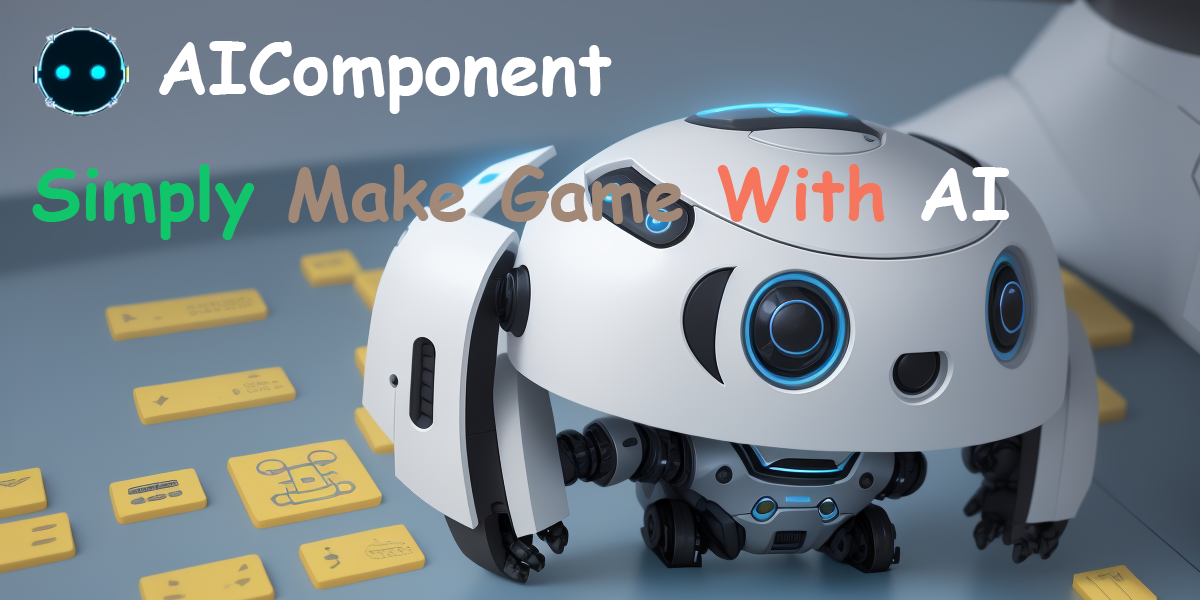
<style>
.page{position:relative;width:1200px;height:600px}
.page>*{position:absolute;margin:0}
.t1{font:72px "ComicSansMS-Bold";color:#ffffff}
.t2{font:72px "ComicSansMS-Bold";color:#11c56a}
.t3{font:72px "ComicSansMS-Bold";color:#a18877}
.t4{font:72px "ComicSansMS-Bold";color:#f5765d}
</style>
<div class="page">
<p class="t1" style="left:32px;top:41px;width:977px;height:199px">AIComponent  <br><span class="t2">Simply </span><span class="t3">Make Game </span><span class="t4">With </span>AI</p>
</div>
